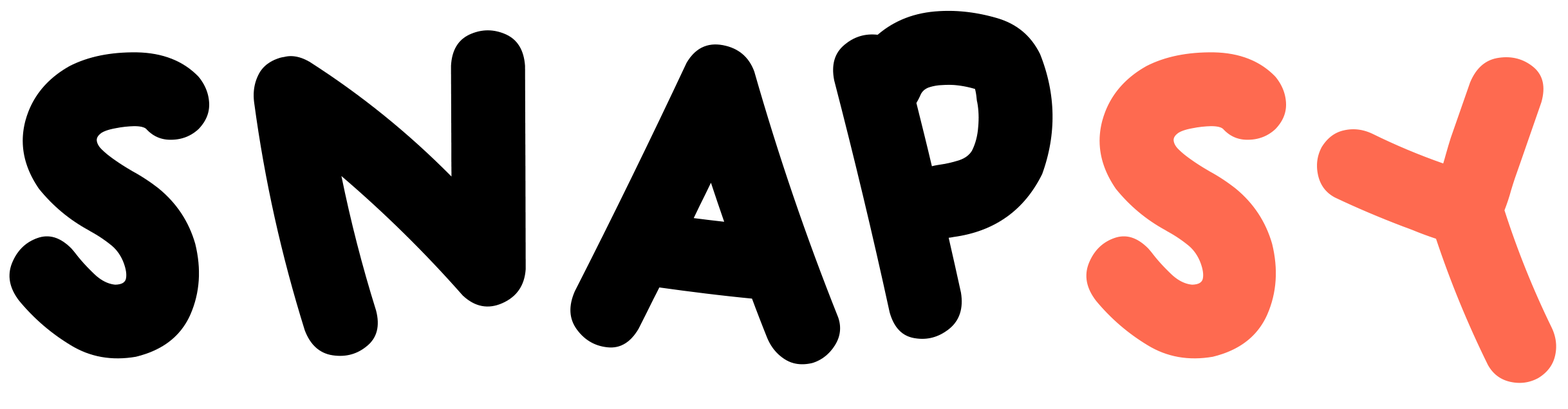
<style>
.page{position:relative;width:1568px;height:409px;background:#ffffff}
.page>*{position:absolute;margin:0}
.t1{font:327.4px "ADELIA";letter-spacing:0.04em;color:#000000}
.t2{font:327.4px "ADELIA";letter-spacing:0.04em;color:#fe6a50}
</style>
<div class="page">
<p class="t1" style="left:9px;top:10px;width:1547px;height:374px">Snap<span class="t2">sy</span></p>
</div>
